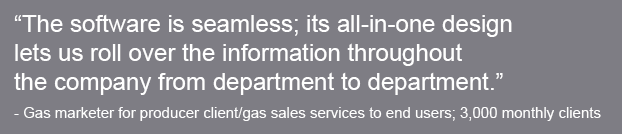
<style>
.page{position:relative;width:622px;height:134px;background:#7e7d84}
.page>*{position:absolute;margin:0}
.t1{font:24px "ArialMT";color:#ffffff}
.t2{font:15px "ArialMT";color:#ffffff}
</style>
<div class="page">
<p class="t1" style="left:14px;top:14px;width:498px;height:81px">“The software is seamless; its all-in-one design <br>lets us roll over the information throughout <br>the company from department to department.”</p>
<p class="t2" style="left:14px;top:107px;width:587px;height:14px">- Gas marketer for producer client/gas sales services to end users; 3,000 monthly clients</p>
</div>
